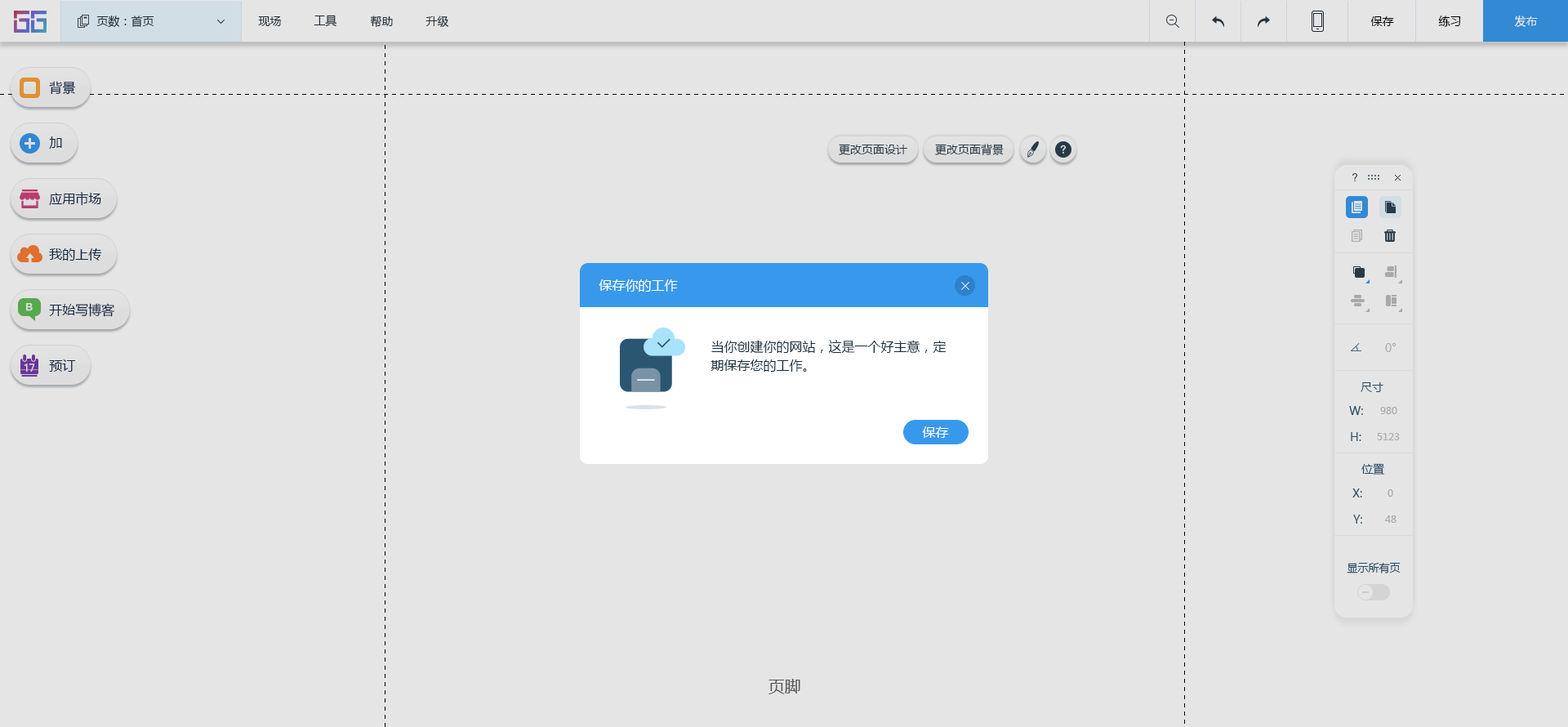
<style>
.page{position:relative;width:1568px;height:727px;background:#e5e5e5}
.page>*{position:absolute;margin:0}
.t1{font:11.4px "MicrosoftYaHei";color:#20303c}
.t2{font:11.4px "MicrosoftYaHei";color:#000000}
.t3{font:11.4px "MicrosoftYaHei";color:#e5e5e5}
.t4{font:13.1px "MicrosoftYaHei";color:#152b4a}
.t5{font:11.4px "MicrosoftYaHei";color:#2d4150}
.t6{font:13.1px "MicrosoftYaHei";color:#ffffff}
.t7{font:13.1px/18.8px "MicrosoftYaHei";color:#162d3d}
.t8{font:11.4px "MicrosoftYaHei";color:#bcbcbc}
.t9{font:11.4px "MicrosoftYaHei";color:#2b5672}
.t10{font:9.8px "MicrosoftYaHei";color:#bcbcbc}
.t11{font:10.6px "MicrosoftYaHei";color:#2b5672}
.t12{font:16.3px "MicrosoftYaHei";color:#555555}
</style>
<div class="page">
<p class="t1" style="left:96px;top:16px;width:58px;height:12px">页数：首页</p>
<p class="t1" style="left:258px;top:16px;width:23px;height:10px">现场</p>
<p class="t1" style="left:314px;top:15px;width:23px;height:12px">工具</p>
<p class="t1" style="left:370px;top:16px;width:23px;height:12px">帮助</p>
<p class="t1" style="left:425px;top:16px;width:24px;height:11px">升级</p>
<p class="t2" style="left:1370px;top:16px;width:24px;height:10px">保存</p>
<p class="t2" style="left:1438px;top:16px;width:23px;height:11px">练习</p>
<p class="t3" style="left:1514px;top:16px;width:24px;height:11px">发布</p>
<p class="t4" style="left:49px;top:81px;width:26px;height:14px">背景</p>
<p class="t4" style="left:49px;top:136px;width:13px;height:13px">加</p>
<p class="t5" style="left:839px;top:144px;width:68px;height:11px">更改页面设计</p>
<p class="t5" style="left:935px;top:144px;width:69px;height:11px">更改页面背景</p>
<p class="t4" style="left:49px;top:192px;width:52px;height:13px">应用市场</p>
<p class="t4" style="left:49px;top:248px;width:53px;height:13px">我的上传</p>
<p class="t6" style="left:599px;top:279px;width:79px;height:13px">保存你的工作</p>
<p class="t4" style="left:49px;top:303px;width:65px;height:14px">开始写博客</p>
<p class="t7" style="left:710px;top:340px;width:237px;height:32px">当你创建你的网站，这是一个好主意，定<br>期保存您的工作。</p>
<p class="t8" style="left:1385px;top:343px;width:11px;height:9px">0°</p>
<p class="t4" style="left:49px;top:359px;width:27px;height:13px">预订</p>
<p class="t9" style="left:1361px;top:382px;width:22px;height:10px">尺寸</p>
<p class="t9" style="left:1349px;top:406px;width:14px;height:9px">W:</p>
<p class="t10" style="left:1380px;top:407px;width:17px;height:7px">980</p>
<p class="t6" style="left:922px;top:426px;width:27px;height:12px">保存</p>
<p class="t9" style="left:1351px;top:432px;width:10px;height:9px">H:</p>
<p class="t10" style="left:1377px;top:433px;width:23px;height:7px">5123</p>
<p class="t9" style="left:1361px;top:463px;width:24px;height:11px">位置</p>
<p class="t9" style="left:1352px;top:488px;width:10px;height:9px">X:</p>
<p class="t10" style="left:1388px;top:489px;width:5px;height:8px">0</p>
<p class="t9" style="left:1353px;top:514px;width:9px;height:9px">Y:</p>
<p class="t10" style="left:1385px;top:515px;width:11px;height:8px">48</p>
<p class="t11" style="left:1347px;top:562px;width:54px;height:11px">显示所有页</p>
<p class="t12" style="left:768px;top:679px;width:32px;height:15px">页脚</p>
</div>
